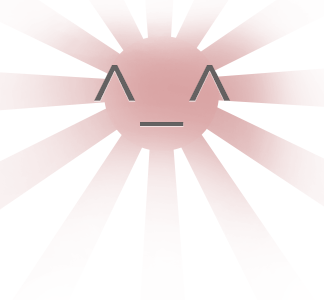
<style>
.page{position:relative;width:325px;height:300px;background:#ffffff}
.page>*{position:absolute;margin:0}
.t1{font:77.7px "MyriadPro-Regular";color:#646262;scale:1.11 1}
</style>
<div class="page">
<p class="t1" style="left:94px;top:65px;width:137px;height:61px">^_^</p>
<p class="t1" style="left:94px;top:66px;width:137px;height:61px">^_^</p>
</div>
